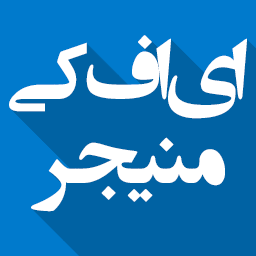
<style>
.page{position:relative;width:256px;height:256px;background:#0062a3}
.page>*{position:absolute;margin:0}
.t1{font:96px "AEntezareZohoor1**-Bold";color:#ffffff}
</style>
<div class="page">
<p class="t1" style="left:9px;top:35px;width:238px;height:84px">ای اف کی</p>
<p class="t1" style="left:31px;top:137px;width:194px;height:75px">منیجر</p>
</div>
